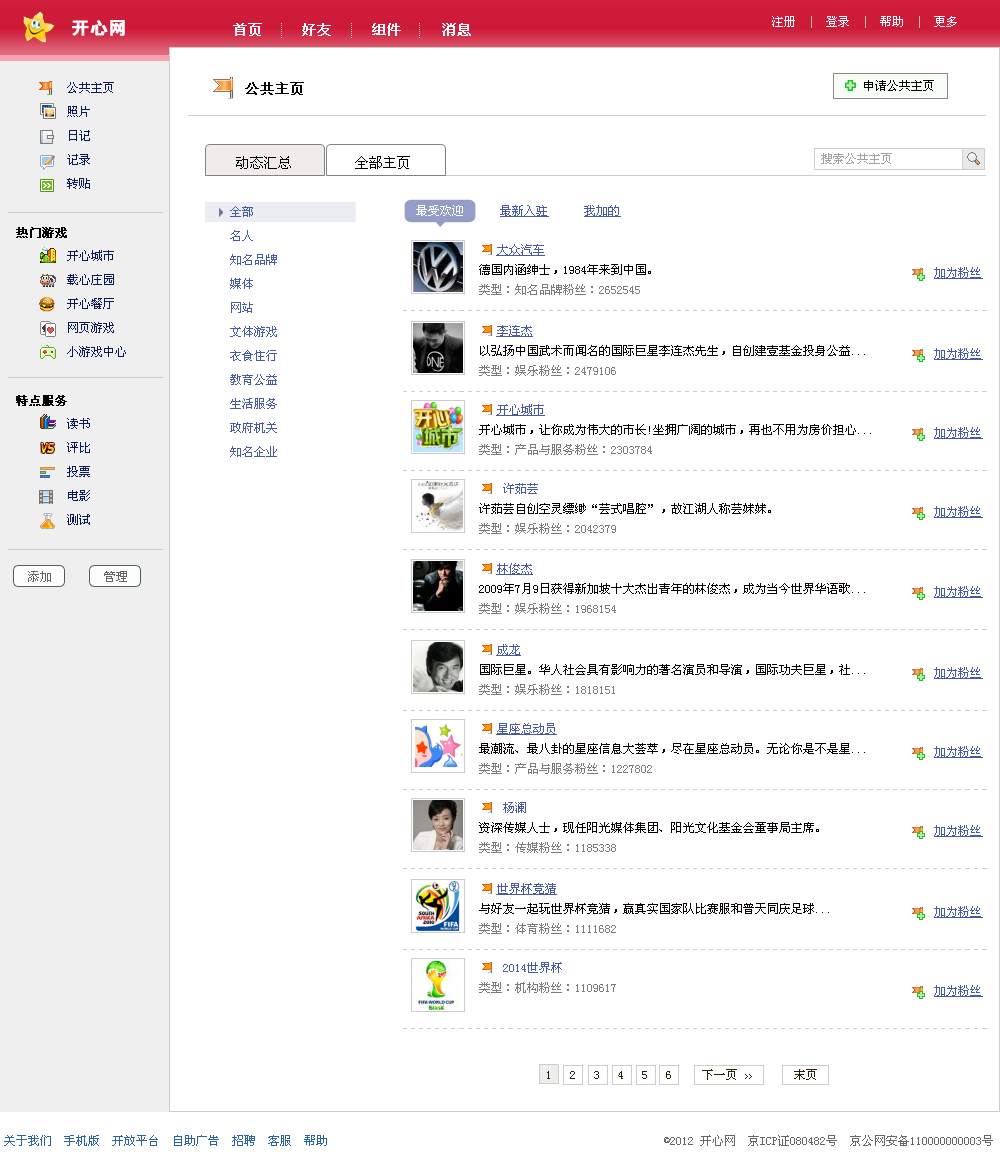
<style>
.page{position:relative;width:1000px;height:1169px;background:#ffffff}
.page>*{position:absolute;margin:0}
.t1{font:12px "SimSun";color:#ffffff}
.t2{font:12px "SimSun";color:#dbb9b9}
.t3{font:18px "FZDHTJW--GB1-0";color:#ffffff;font-weight:bold}
.t4{font:14px "SimSun";color:#ffffff;font-weight:bold}
.t5{font:12px/24px "SimSun";color:#091a59}
.t6{font:14px "SimSun";color:#010000;font-weight:bold}
.t7{font:12px "SimSun";color:#000000}
.t8{font:14px "SimSun";color:#000000}
.t9{font:12px "SimSun";color:#a6a1a1}
.t10{font:12px/24px "SimSun";color:#465aa5}
.t11{font:12px "SimSun";color:#465aa5;text-decoration:underline}
.t12{font:12px/24px "SimSun";color:#030000;font-weight:bold}
.t13{font:12px/20px "SimSun";color:#060000}
.t14{font:12px/20px "SimSun";color:#465aa5}
.t15{font:12px/20px "SimSun";color:#465aa5;text-decoration:underline}
.t16{font:12px/20px "SimSun";color:#7c7b7b}
.t17{font:12px "SimSun";color:#666666}
.t18{font:12px "SimSun";color:#282008}
.t19{font:8px "SimSun";color:#282008}
.t20{font:12px "SimSun";color:#2b62a5}
</style>
<div class="page">
<p class="t1" style="left:772px;top:16px;width:185px;height:12px">注册  <span class="t2">|</span>  登录  <span class="t2">|</span>  帮助  <span class="t2">|</span>  更多</p>
<p class="t3" style="left:72px;top:20px;width:53px;height:16px">开心网</p>
<p class="t4" style="left:233px;top:23px;width:238px;height:13px">首页     好友     组件     消息</p>
<p class="t5" style="left:67px;top:82px;width:59px;height:443px;text-align:justify">公共主页<br>照片<br>日记<br>记录<br>转贴<br><br><br>开心城市<br>载心庄园<br>开心餐厅<br>网页游戏<br>小游戏中心<br><br><br>读书<br>评比<br>投票<br>电影<br>测试</p>
<p class="t6" style="left:245px;top:82px;width:59px;height:13px">公共主页</p>
<p class="t7" style="left:864px;top:80px;width:70px;height:11px">申请公共主页</p>
<p class="t8" style="left:236px;top:156px;width:174px;height:13px">动态汇总         全部主页</p>
<p class="t9" style="left:821px;top:153px;width:71px;height:11px">搜索公共主页</p>
<p class="t10" style="left:230px;top:206px;width:47px;height:251px;text-align:justify">全部<br>名人<br>知名品牌<br>媒体<br>网站<br>文体游戏<br>衣食住行<br>教育公益<br>生活服务<br>政府机关<br>知名企业</p>
<p class="t11" style="left:416px;top:205px;width:205px;height:12px"><span class="t1">最受欢迎      </span>最新入驻      我加的</p>
<p class="t12" style="left:16px;top:227px;width:51px;height:179px;text-align:justify">热门游戏<br><br><br><br><br><br><br>特点服务</p>
<p class="t13" style="left:479px;top:244px;width:172px;height:51px;text-align:justify"><span class="t14">   </span><span class="t15">大众汽车<br></span>德国内涵绅士，1984年来到中国。<br><span class="t16">类型：知名品牌粉丝：2652545</span></p>
<p class="t11" style="left:934px;top:267px;width:49px;height:12px">加为粉丝</p>
<p class="t13" style="left:479px;top:325px;width:386px;height:51px;text-align:justify"><span class="t14">   </span><span class="t15">李连杰<br></span>以弘扬中国武术而闻名的国际巨星李连杰先生，自创建壹基金投身公益...<br><span class="t16">类型：娱乐粉丝：2479106</span></p>
<p class="t11" style="left:934px;top:348px;width:49px;height:12px">加为粉丝</p>
<p class="t13" style="left:479px;top:404px;width:392px;height:51px;text-align:justify"><span class="t14">   </span><span class="t15">开心城市<br></span>开心城市，让你成为伟大的市长!坐拥广阔的城市，再也不用为房价担心...<br><span class="t16">类型：产品与服务粉丝：2303784</span></p>
<p class="t11" style="left:934px;top:427px;width:49px;height:12px">加为粉丝</p>
<p class="t13" style="left:479px;top:483px;width:292px;height:51px;text-align:justify"><span class="t14">    许茹芸<br></span>许茹芸自创空灵缥缈“芸式唱腔”，故江湖人称芸妹妹。<br><span class="t16">类型：娱乐粉丝：2042379</span></p>
<p class="t11" style="left:934px;top:506px;width:49px;height:12px">加为粉丝</p>
<p class="t13" style="left:479px;top:563px;width:386px;height:51px;text-align:justify"><span class="t14">   </span><span class="t15">林俊杰<br></span>2009年7月9日获得新加坡十大杰出青年的林俊杰，成为当今世界华语歌...<br><span class="t16">类型：娱乐粉丝：1968154</span></p>
<p class="t17" style="left:28px;top:571px;width:23px;height:11px">添加</p>
<p class="t17" style="left:104px;top:571px;width:23px;height:11px">管理</p>
<p class="t11" style="left:934px;top:586px;width:49px;height:12px">加为粉丝</p>
<p class="t13" style="left:479px;top:644px;width:386px;height:51px;text-align:justify"><span class="t14">   </span><span class="t15">成龙<br></span>国际巨星。华人社会具有影响力的著名演员和导演，国际功夫巨星，社...<br><span class="t16">类型：娱乐粉丝：1818151</span></p>
<p class="t11" style="left:934px;top:667px;width:49px;height:12px">加为粉丝</p>
<p class="t13" style="left:479px;top:723px;width:386px;height:51px;text-align:justify"><span class="t14">   </span><span class="t15">星座总动员<br></span>最潮流、最八卦的星座信息大荟萃，尽在星座总动员。无论你是不是星...<br><span class="t16">类型：产品与服务粉丝：1227802</span></p>
<p class="t11" style="left:934px;top:746px;width:49px;height:12px">加为粉丝</p>
<p class="t13" style="left:479px;top:802px;width:340px;height:51px;text-align:justify"><span class="t14">    杨澜<br></span>资深传媒人士，现任阳光媒体集团、阳光文化基金会董事局主席。<br><span class="t16">类型：传媒粉丝：1185338</span></p>
<p class="t11" style="left:934px;top:825px;width:49px;height:12px">加为粉丝</p>
<p class="t13" style="left:479px;top:883px;width:350px;height:51px;text-align:justify"><span class="t14">   </span><span class="t15">世界杯竞猜<br></span>与好友一起玩世界杯竞猜，赢真实国家队比赛服和普天同庆足球...<br><span class="t16">类型：体育粉丝：1111682</span></p>
<p class="t11" style="left:934px;top:906px;width:49px;height:12px">加为粉丝</p>
<p class="t16" style="left:479px;top:962px;width:137px;height:31px;text-align:justify"><span class="t14">    2014世界杯<br></span>类型：机构粉丝：1109617</p>
<p class="t11" style="left:934px;top:985px;width:49px;height:12px">加为粉丝</p>
<p class="t18" style="left:547px;top:1069px;width:270px;height:11px">1   2   3   4   5   6     下一页 <span class="t19">&gt;&gt;</span>       末页</p>
<p class="t17" style="left:4px;top:1135px;width:989px;height:11px"><span class="t20">关于我们  手机版  开放平台  自助广告  招聘  客服  帮助                                                       </span> ©2012 开心网  京ICP证080482号  京公网安备110000000003号</p>
</div>
